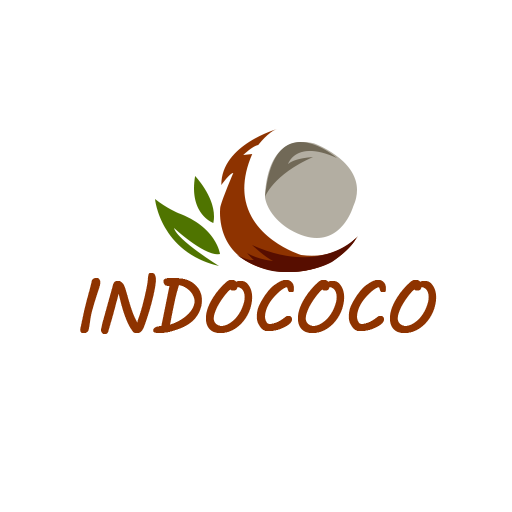
<style>
.page{position:relative;width:512px;height:512px;background:#ffffff}
.page>*{position:absolute;margin:0}
.t1{font:75.2px "MVBoli";color:#8e3300;font-weight:bold;scale:0.9 1}
</style>
<div class="page">
<p class="t1" style="left:80px;top:273px;width:357px;height:61px">INDOCOCO</p>
</div>
